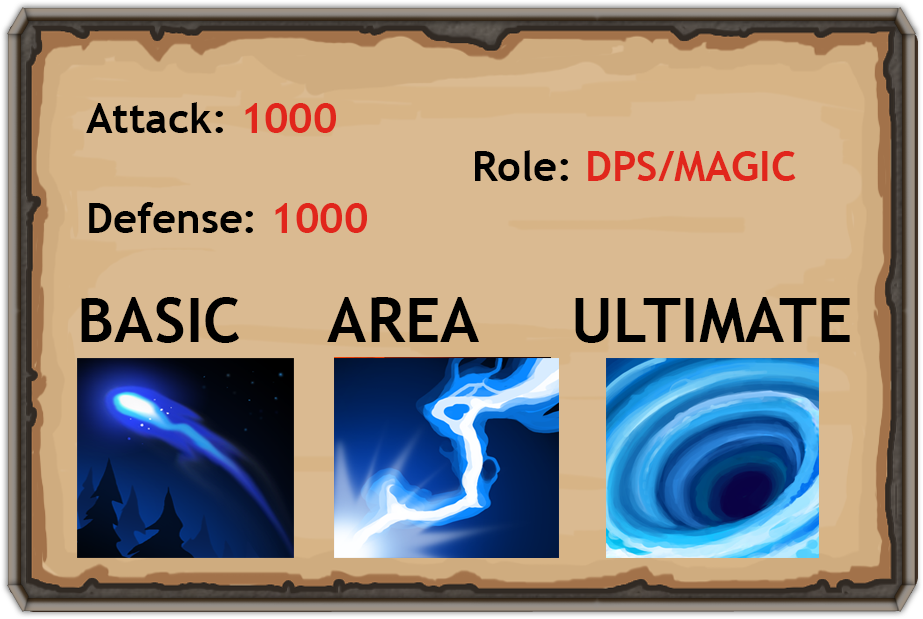
<style>
.page{position:relative;width:923px;height:619px;background:#daba91}
.page>*{position:absolute;margin:0}
.t1{font:41.7px "TrebuchetMS-Bold";color:#000000}
.t2{font:41.7px "TrebuchetMS-Bold";color:#e1261c}
.t3{font:62.5px "TrebuchetMS-Bold";color:#000000}
</style>
<div class="page">
<p class="t1" style="left:86px;top:102px;width:281px;height:131px">Attack: <span class="t2">1000 <br></span><br>Defense: <span class="t2">1000</span></p>
<p class="t2" style="left:475px;top:150px;width:321px;height:31px"><span class="t1">Role: </span>DPS/MAGIC</p>
<p class="t3" style="left:81px;top:297px;width:769px;height:46px">BASIC    AREA     ULTIMATE</p>
</div>
